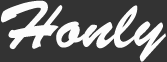
<style>
.page{position:relative;width:167px;height:62px;background:#333333}
.page>*{position:absolute;margin:0}
.t1{font:67px "BrushScriptStd";color:#fcfcfc}
</style>
<div class="page">
<p class="t1" style="left:1px;top:0px;width:165px;height:62px">Honly</p>
</div>
